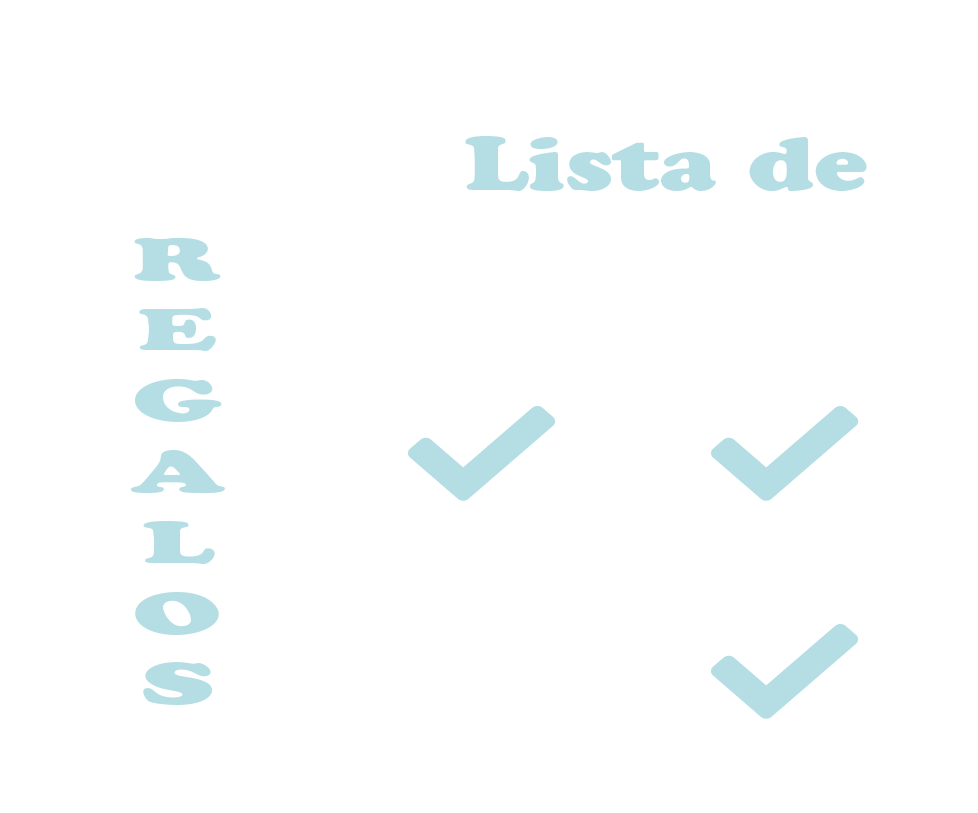
<style>
.page{position:relative;width:978px;height:813px;background:#ffffff}
.page>*{position:absolute;margin:0}
.t1{font:75.1px "CooperBlackStd";color:#b4dee3;scale:1.28 1}
.t2{font:59px "CooperBlackStd";color:#b4dee3;scale:1.83 1}
</style>
<div class="page">
<p class="t1" style="left:465px;top:136px;width:402px;height:55px">Lista de</p>
<p class="t2" style="left:131px;top:237px;width:94px;height:468px;text-align:center">R<br>E<br>G<br>A<br>L<br>O<br>S</p>
</div>
